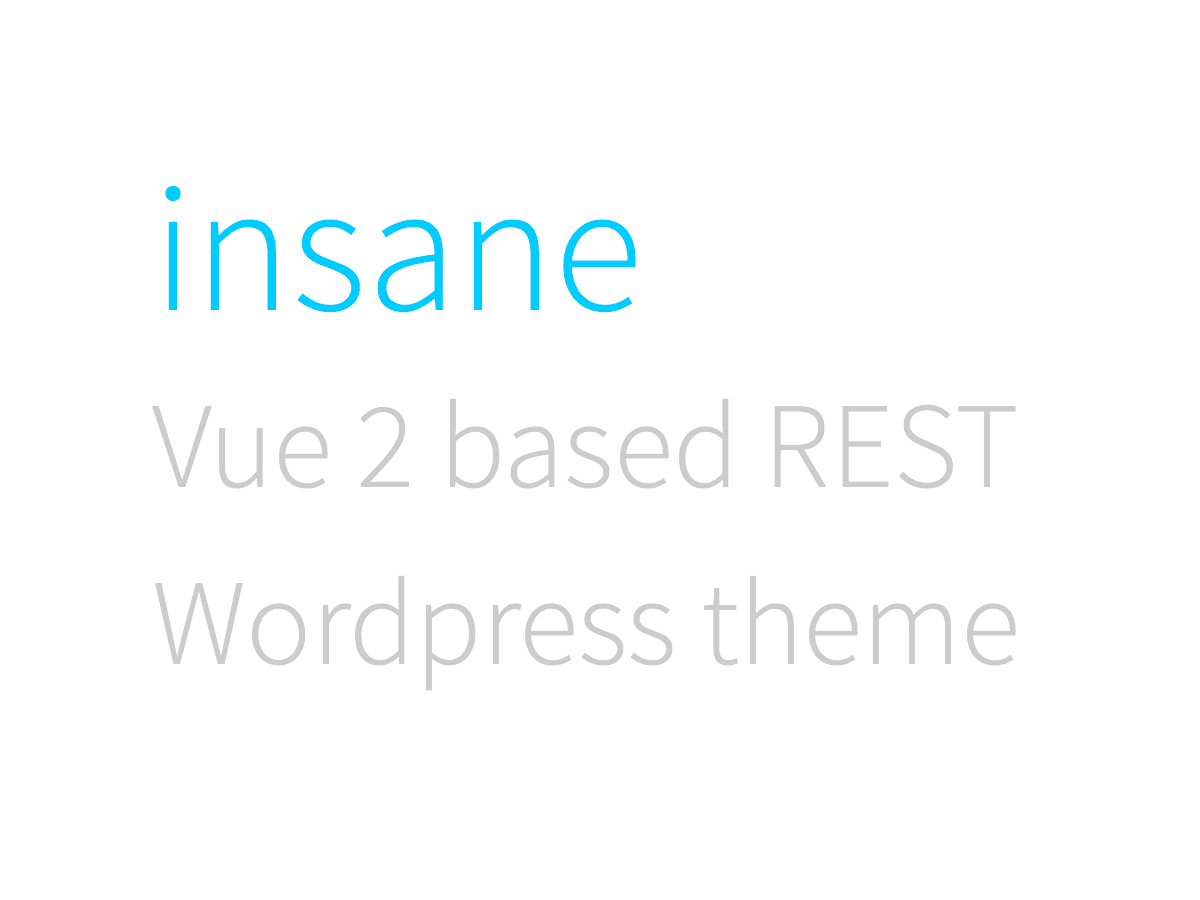
<style>
.page{position:relative;width:1200px;height:900px;background:#ffffff}
.page>*{position:absolute;margin:0}
.t1{font:121.9px "SourceSansPro-Light";color:#cccccc}
.t2{font:182.9px "SourceSansPro-Light";color:#00ccff}
</style>
<div class="page">
<p class="t1" style="left:152px;top:186px;width:864px;height:505px"><span class="t2">insane<br></span>Vue 2 based REST<br>Wordpress theme</p>
</div>
